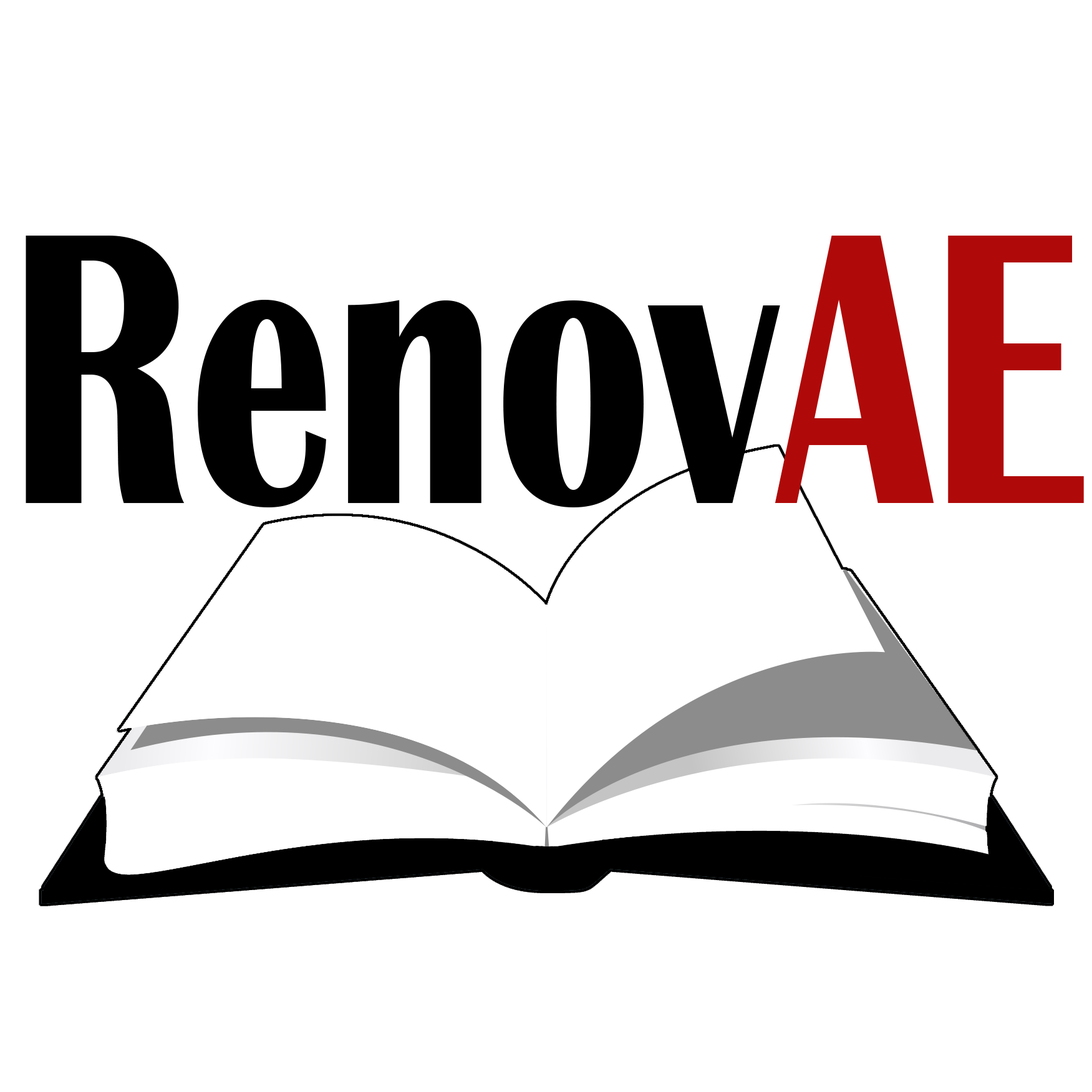
<style>
.page{position:relative;width:1092px;height:1092px;background:#ffffff}
.page>*{position:absolute;margin:0}
.t1{font:401.5px "BritannicBold";color:#000000;scale:0.71 1}
.t2{font:401.5px "BritannicBold";color:#b00909;scale:0.71 1}
</style>
<div class="page">
<p class="t1" style="left:26px;top:236px;width:1058px;height:271px">Renov<span class="t2">AE</span></p>
</div>
